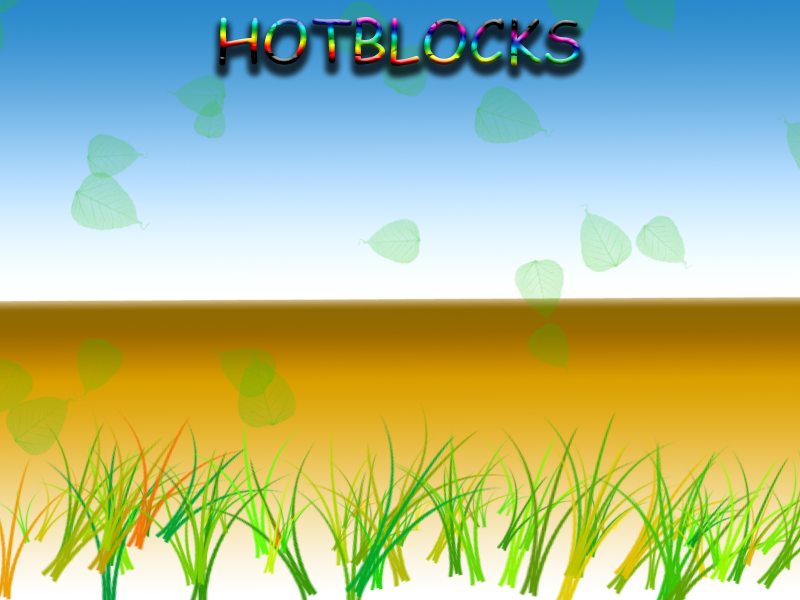
<style>
.page{position:relative;width:800px;height:600px}
.page>*{position:absolute;margin:0}
.t1{font:60px "ComicSansMS"}
</style>
<div class="page">
<p class="t1" style="left:219px;top:17px;width:361px;height:50px">HOTBLOCKS</p>
</div>
